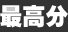
<style>
.page{position:relative;width:68px;height:32px;background:#333333}
.page>*{position:absolute;margin:0}
.t1{font:23px "HeitiEG-Ultra-GB";color:#ffffff}
</style>
<div class="page">
<p class="t1" style="left:0px;top:4px;width:68px;height:24px">最高分</p>
</div>
